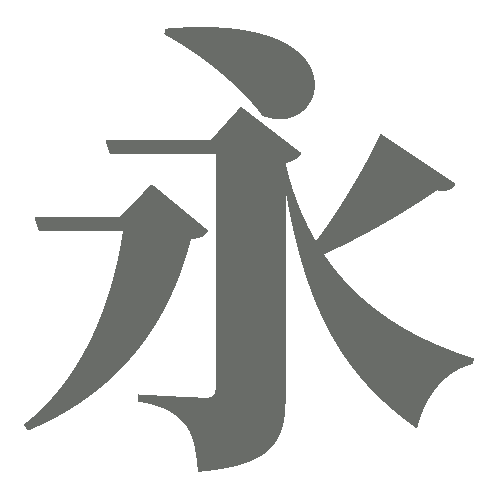
<style>
.page{position:relative;width:500px;height:500px;background:#ffffff}
.page>*{position:absolute;margin:0}
.t1{font:466.6px "SourceHanSerifCN-Heavy";color:#696c68}
</style>
<div class="page">
<p class="t1" style="left:24px;top:27px;width:450px;height:445px">永</p>
</div>
